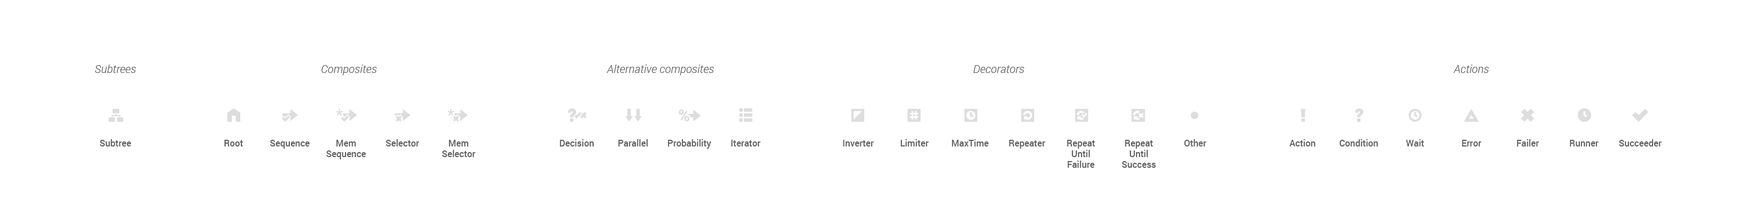
<style>
.page{position:relative;width:1742px;height:220px;background:#ffffff}
.page>*{position:absolute;margin:0}
.t1{font:11.2px "Roboto-LightItalic";color:#646363}
.t2{font:9px "Roboto-Medium";color:#646363}
</style>
<div class="page">
<p class="t1" style="left:95px;top:65px;width:41px;height:8px">Subtrees</p>
<p class="t1" style="left:321px;top:65px;width:56px;height:10px">Composites</p>
<p class="t1" style="left:606px;top:65px;width:108px;height:10px">Alternative composites</p>
<p class="t1" style="left:973px;top:65px;width:51px;height:8px">Decorators</p>
<p class="t1" style="left:1453px;top:65px;width:35px;height:8px">Actions</p>
<p class="t2" style="left:100px;top:140px;width:31px;height:7px">Subtree</p>
<p class="t2" style="left:224px;top:140px;width:19px;height:7px">Root</p>
<p class="t2" style="left:270px;top:140px;width:40px;height:9px">Sequence</p>
<p class="t2" style="left:326px;top:140px;width:40px;height:20px;text-align:center">Mem<br>Sequence</p>
<p class="t2" style="left:386px;top:140px;width:33px;height:7px">Selector</p>
<p class="t2" style="left:442px;top:140px;width:33px;height:18px;text-align:center">Mem<br>Selector</p>
<p class="t2" style="left:560px;top:140px;width:34px;height:7px">Decision</p>
<p class="t2" style="left:618px;top:140px;width:30px;height:7px">Parallel</p>
<p class="t2" style="left:668px;top:140px;width:43px;height:9px">Probability</p>
<p class="t2" style="left:731px;top:140px;width:29px;height:7px">Iterator</p>
<p class="t2" style="left:843px;top:140px;width:31px;height:7px">Inverter</p>
<p class="t2" style="left:900px;top:140px;width:29px;height:7px">Limiter</p>
<p class="t2" style="left:951px;top:140px;width:37px;height:7px">MaxTime</p>
<p class="t2" style="left:1009px;top:140px;width:36px;height:9px">Repeater</p>
<p class="t2" style="left:1066px;top:140px;width:29px;height:28px;text-align:center">Repeat<br>Until<br>Failure</p>
<p class="t2" style="left:1122px;top:140px;width:33px;height:28px;text-align:center">Repeat<br>Until<br>Success</p>
<p class="t2" style="left:1184px;top:140px;width:22px;height:7px">Other</p>
<p class="t2" style="left:1289px;top:140px;width:26px;height:7px">Action</p>
<p class="t2" style="left:1339px;top:140px;width:39px;height:7px">Condition</p>
<p class="t2" style="left:1406px;top:140px;width:18px;height:7px">Wait</p>
<p class="t2" style="left:1461px;top:140px;width:20px;height:7px">Error</p>
<p class="t2" style="left:1516px;top:140px;width:22px;height:7px">Failer</p>
<p class="t2" style="left:1569px;top:140px;width:29px;height:7px">Runner</p>
<p class="t2" style="left:1618px;top:140px;width:43px;height:7px">Succeeder</p>
</div>
